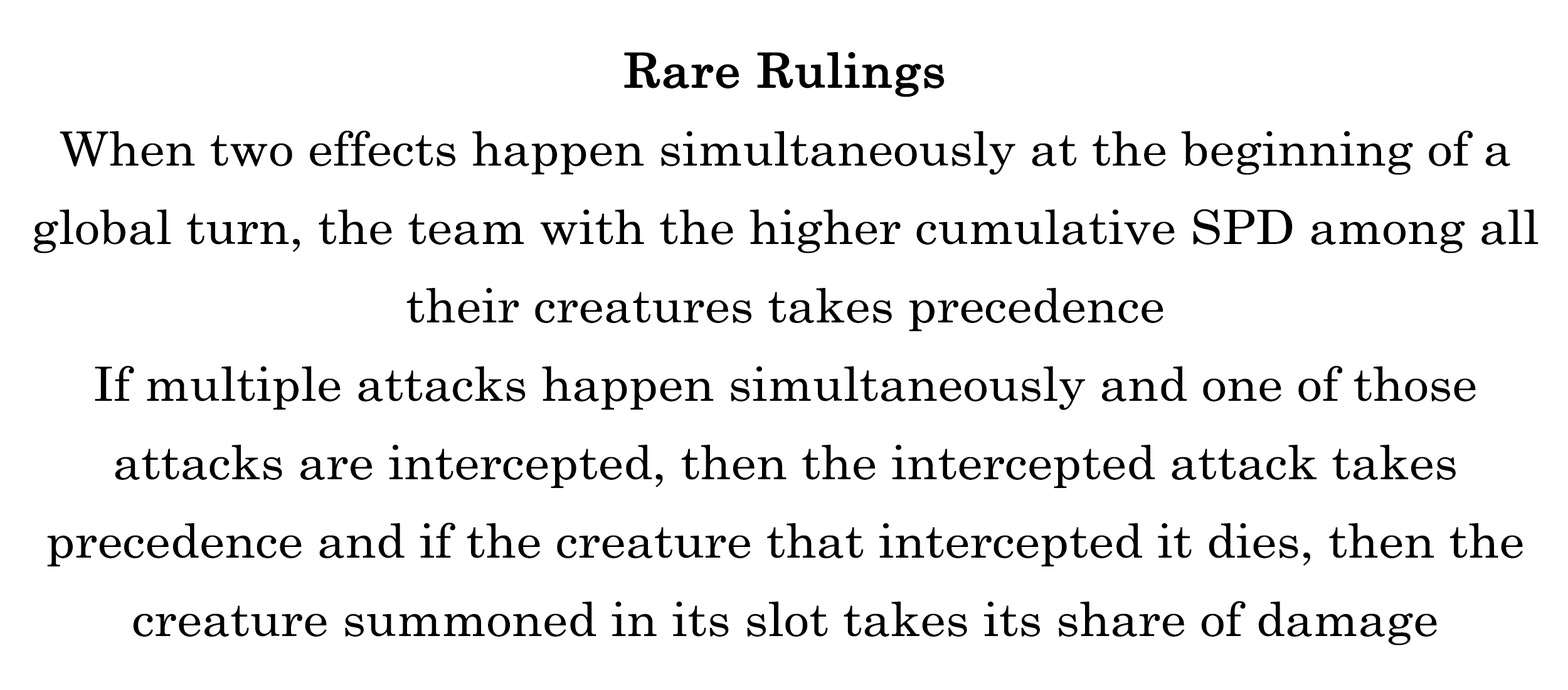
<style>
.page{position:relative;width:1568px;height:690px;background:#ffffff}
.page>*{position:absolute;margin:0}
.t1{font:80.7px/78.4px "Century";color:#000000;scale:1.07 1}
.t2{font:80.7px/78.4px "Century";color:#000000;font-weight:bold;scale:1.07 1}
</style>
<div class="page">
<p class="t1" style="left:34px;top:52px;width:1505px;height:593px;text-align:center"><span class="t2">Rare Rulings<br></span>When two effects happen simultaneously at the beginning of a global turn, the team with the higher cumulative SPD among all their creatures takes precedence<br>If multiple attacks happen simultaneously and one of those attacks are intercepted, then the intercepted attack takes precedence and if the creature that intercepted it dies, then the creature summoned in its slot takes its share of damage</p>
</div>
